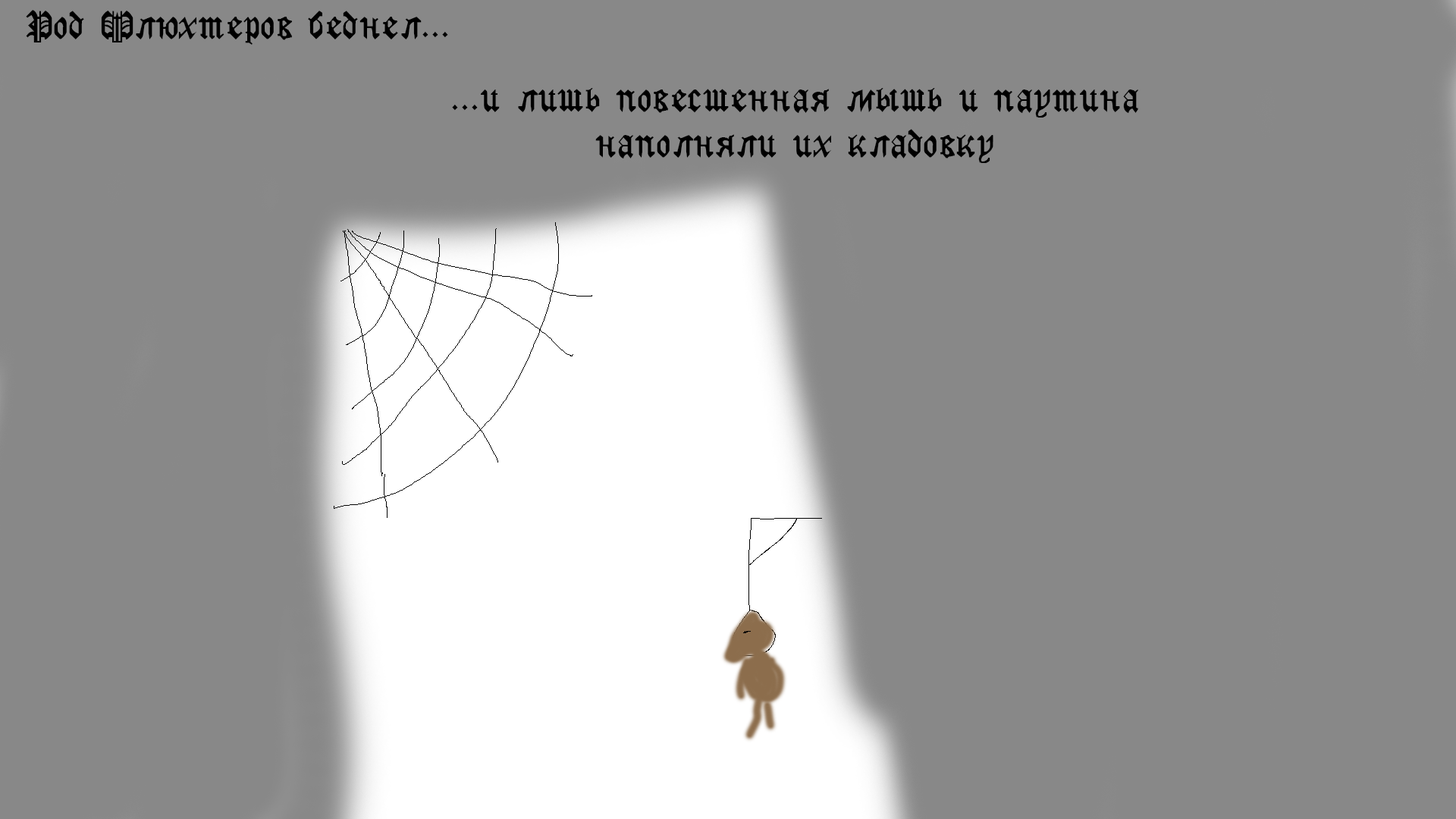
<style>
.page{position:relative;width:1456px;height:819px;background:#888888}
.page>*{position:absolute;margin:0}
.t1{font:9.1px "GothicRusMedium";color:#000000}
</style>
<div class="page">
<p class="t1" style="left:26px;top:10px;width:422px;height:35px;text-align:center">Род Флюхтеров беднел...</p>
<p class="t1" style="left:452px;top:88px;width:687px;height:75px;text-align:center">...и лишь повесшенная мышь и паутина<br>наполняли их кладовку</p>
</div>
